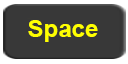
<style>
.page{position:relative;width:128px;height:64px;background:#383838}
.page>*{position:absolute;margin:0}
.t1{font:24px "Arial-BoldMT";color:#ffff00}
</style>
<div class="page">
<p class="t1" style="left:28px;top:20px;width:70px;height:22px">Space</p>
</div>
